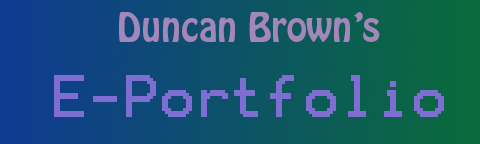
<style>
.page{position:relative;width:480px;height:144px}
.page>*{position:absolute;margin:0}
.t1{font:36px "HoboStd";color:#a287b9}
.t2{font:48px "Terminal";color:#7e6ed1}
</style>
<div class="page">
<p class="t1" style="left:119px;top:12px;width:261px;height:30px">Duncan Brown’s</p>
<p class="t2" style="left:54px;top:75px;width:390px;height:42px">E-Portfolio</p>
</div>
